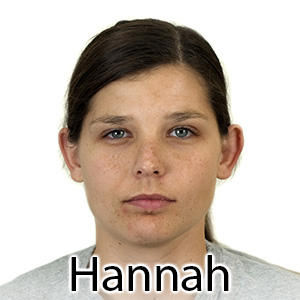
<style>
.page{position:relative;width:300px;height:300px;background:#ffffff}
.page>*{position:absolute;margin:0}
.t1{font:50px "MyriadPro-Regular";color:#000000}
</style>
<div class="page">
<p class="t1" style="left:71px;top:255px;width:158px;height:36px">Hannah</p>
</div>
